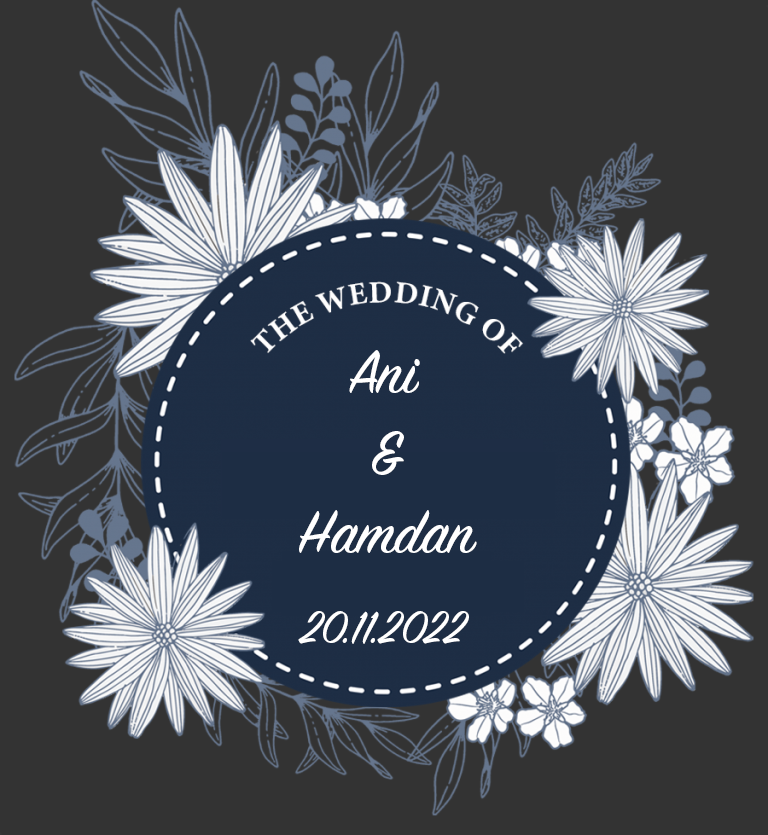
<style>
.page{position:relative;width:768px;height:835px;background:#333333}
.page>*{position:absolute;margin:0}
.t1{font:66.7px "SignPainter-HouseScript";color:#ffffff}
.t2{font:50.8px "SignPainter-HouseScript";color:#ffffff}
</style>
<div class="page">
<p class="t1" style="left:299px;top:350px;width:178px;height:203px">Ani  <br>  &amp;  <br>Hamdan</p>
<p class="t2" style="left:298px;top:611px;width:171px;height:33px">20.11.2022</p>
</div>
